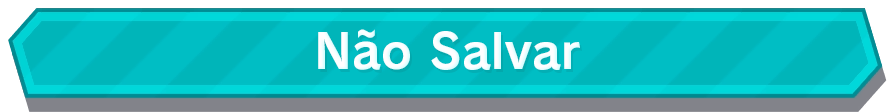
<style>
.page{position:relative;width:891px;height:112px}
.page>*{position:absolute;margin:0}
.t1{font:48px "RodinPro-B";color:#fffeff}
</style>
<div class="page">
<p class="t1" style="left:318px;top:29px;width:262px;height:41px">Não Salvar</p>
</div>
